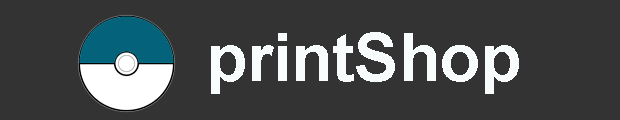
<style>
.page{position:relative;width:620px;height:120px;background:#333333}
.page>*{position:absolute;margin:0}
.t1{font:66.7px "Arial-BoldMT";color:#f9fcfc}
</style>
<div class="page">
<p class="t1" style="left:211px;top:32px;width:308px;height:62px">printShop</p>
</div>
